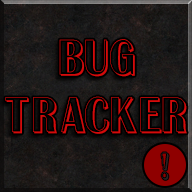
<style>
.page{position:relative;width:192px;height:192px}
.page>*{position:absolute;margin:0}
.t1{font:48px "AAlbionicTitulNrSh";color:#d30b0b}
.t2{font:36px "AAlbionicTitulNrSh";color:#2a2323}
</style>
<div class="page">
<p class="t1" style="left:5px;top:39px;width:182px;height:95px;text-align:center">Bug<br>Tracker</p>
<p class="t2" style="left:161px;top:152px;width:8px;height:28px">!</p>
</div>
